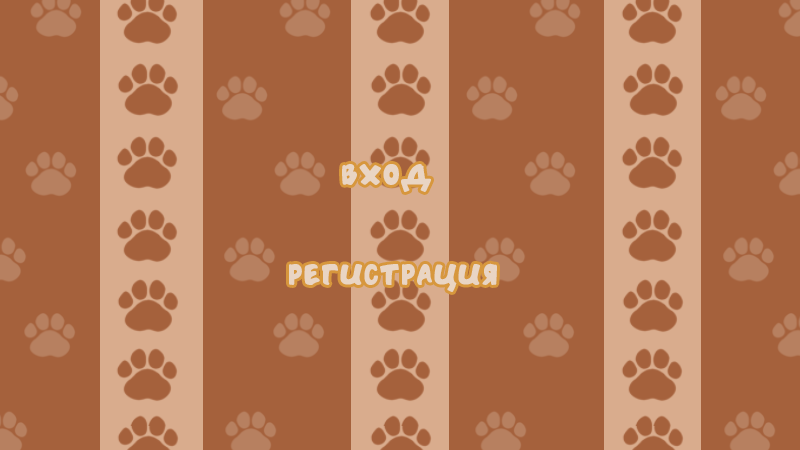
<style>
.page{position:relative;width:800px;height:450px;background:#a5613c}
.page>*{position:absolute;margin:0}
.t1{font:24px "HandSound";color:#e9d5c4}
</style>
<div class="page">
<p class="t1" style="left:342px;top:163px;width:89px;height:29px">ВХОД</p>
<p class="t1" style="left:289px;top:263px;width:208px;height:29px">РЕГИСТРАЦИЯ</p>
</div>
